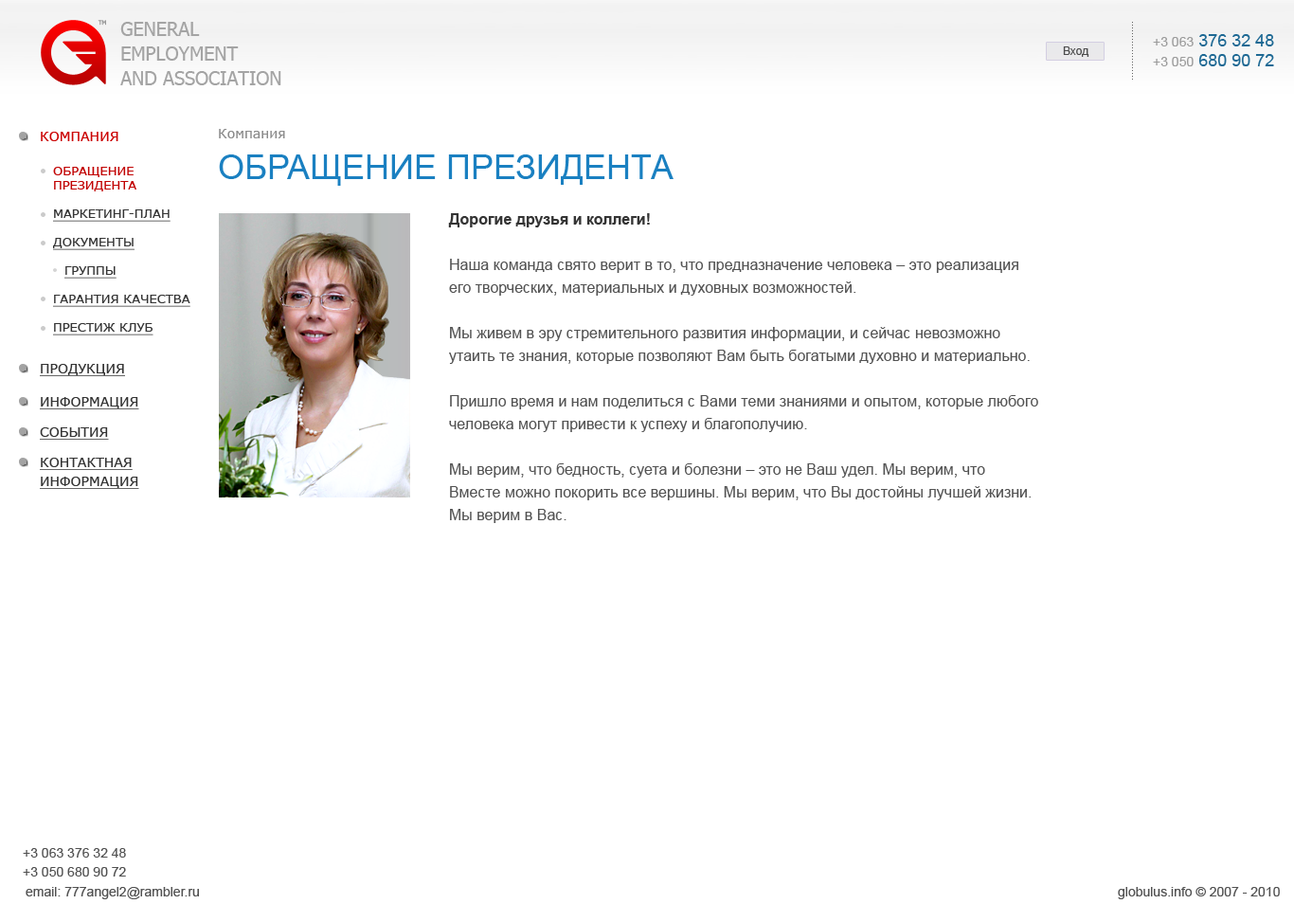
<style>
.page{position:relative;width:1294px;height:922px;background:#ffffff}
.page>*{position:absolute;margin:0}
.t1{font:5.7px "Tahoma";color:#979797;text-transform:uppercase}
.t2{font:18.8px/24.9px "Tahoma";color:#a4a4a4;text-transform:uppercase}
.t3{font:17px "ArialMT";color:#1e6994}
.t4{font:13.3px "ArialMT";color:#9c9c9c}
.t5{font:11.4px "ArialMT";color:#4c4c4c}
.t6{font:13.3px "Verdana";color:#cb0202;text-transform:uppercase}
.t7{font:13.3px "Verdana";color:#8c8c8c}
.t8{font:34.1px "ArialMT";color:#1a80c1;text-transform:uppercase}
.t9{font:12.3px/28.4px "Verdana";color:#343434;text-transform:uppercase;text-decoration:underline}
.t10{font:12.3px "Verdana";color:#c10202;text-transform:uppercase}
.t11{font:15.2px/22.7px "ArialMT";color:#535353}
.t12{font:15.2px/22.7px "Arial-BoldMT";color:#343434}
.t13{font:13.3px "Verdana";color:#343434;text-transform:uppercase;text-decoration:underline}
.t14{font:13.3px/18.9px "Verdana";color:#343434;text-transform:uppercase;text-decoration:underline}
.t15{font:13.3px "ArialMT";color:#515151}
</style>
<div class="page">
<p class="t1" style="left:98px;top:20px;width:8px;height:6px">TM</p>
<p class="t2" style="left:120px;top:22px;width:161px;height:63px">general <br>employment <br>and association</p>
<p class="t3" style="left:1153px;top:34px;width:121px;height:12px"><span class="t4">+3 063 </span>376 32 48</p>
<p class="t5" style="left:1063px;top:46px;width:26px;height:11px">Вход</p>
<p class="t3" style="left:1153px;top:54px;width:121px;height:12px"><span class="t4">+3 050 </span>680 90 72</p>
<p class="t6" style="left:41px;top:132px;width:77px;height:9px">Компания</p>
<p class="t7" style="left:219px;top:129px;width:66px;height:9px">Компания</p>
<p class="t8" style="left:219px;top:154px;width:454px;height:32px">Обращение президента</p>
<p class="t9" style="left:53px;top:167px;width:137px;height:168px"><span class="t10">Обращение <br>президента<br></span>Маркетинг-план<br>Документы<br>Группы<br>Гарантия качества<br>Престиж клуб</p>
<p class="t11" style="left:448px;top:213px;width:590px;height:310px"><span class="t12">Дорогие друзья и коллеги!<br><br></span>Наша команда свято верит в то, что предназначение человека – это реализация его творческих, материальных и духовных возможностей.<br><br>Мы живем в эру стремительного развития информации, и сейчас невозможно утаить те знания, которые позволяют Вам быть богатыми духовно и материально.<br><br>Пришло время и нам поделиться с Вами теми знаниями и опытом, которые любого человека могут привести к успеху и благополучию.<br><br>Мы верим, что бедность, суета и болезни – это не Ваш удел. Мы верим, что Вместе можно покорить все вершины. Мы верим, что Вы достойны лучшей жизни. Мы верим в Вас.</p>
<p class="t13" style="left:40px;top:364px;width:85px;height:12px">Продукция</p>
<p class="t13" style="left:40px;top:397px;width:99px;height:12px">Информация</p>
<p class="t13" style="left:40px;top:427px;width:69px;height:12px">События</p>
<p class="t14" style="left:40px;top:457px;width:99px;height:32px">Контактная<br>информация</p>
<p class="t15" style="left:23px;top:848px;width:103px;height:9px">+3 063 376 32 48</p>
<p class="t15" style="left:23px;top:867px;width:103px;height:9px">+3 050 680 90 72</p>
<p class="t15" style="left:26px;top:887px;width:173px;height:12px">email: 777angel2@rambler.ru</p>
<p class="t15" style="left:1118px;top:887px;width:162px;height:12px">globulus.info © 2007 - 2010</p>
</div>
